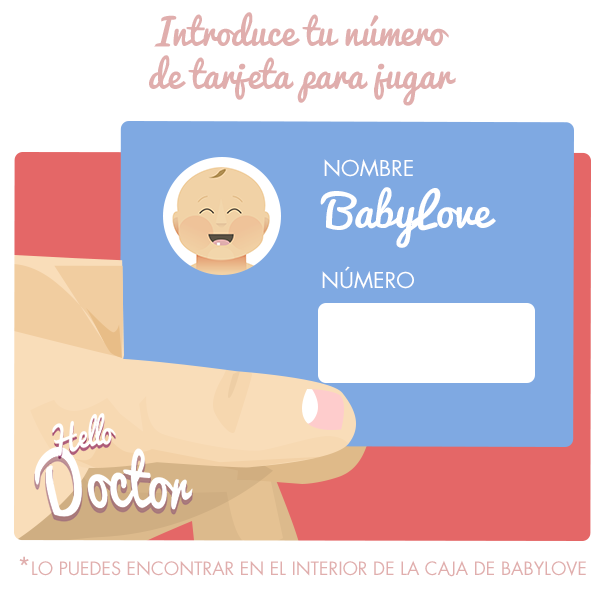
<style>
.page{position:relative;width:604px;height:603px;background:#ffffff}
.page>*{position:absolute;margin:0}
.t1{font:35.9px "Pacifico";color:#e0aead}
.t2{font:21.4px "FuturaStd-Book";color:#ffffff}
.t3{font:43.5px "Pacifico";color:#ffffff}
.t4{font:18px "FuturaStd-Book";color:#e0aead;text-transform:uppercase}
.t5{font:24px "FuturaStd-Book";color:#e0aead}
</style>
<div class="page">
<p class="t1" style="left:149px;top:12px;width:307px;height:94px;text-align:center">Introduce tu número<br>de tarjeta para jugar</p>
<p class="t2" style="left:324px;top:159px;width:89px;height:18px">NOMBRE</p>
<p class="t3" style="left:320px;top:187px;width:176px;height:61px">BabyLove</p>
<p class="t2" style="left:322px;top:266px;width:92px;height:23px">NÚMERO</p>
<p class="t4" style="left:19px;top:556px;width:567px;height:21px"><span class="t5">*</span>Lo puedes encontrar en el interior de la caja de BabyLove</p>
</div>
